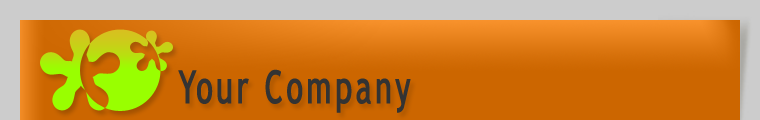
<style>
.page{position:relative;width:760px;height:120px;background:#cc6600}
.page>*{position:absolute;margin:0}
.t1{font:45px "TrebuchetMS";letter-spacing:0.1em;color:#333333;font-weight:bold;scale:0.67 1}
</style>
<div class="page">
<p class="t1" style="left:178px;top:69px;width:233px;height:44px">Your Company</p>
</div>
